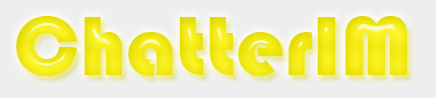
<style>
.page{position:relative;width:436px;height:98px;background:#eeeeee}
.page>*{position:absolute;margin:0}
.t1{font:87.2px "Bauhaus93";color:#f2ea15}
</style>
<div class="page">
<p class="t1" style="left:16px;top:16px;width:391px;height:60px">ChatterIM</p>
</div>
